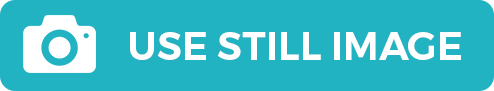
<style>
.page{position:relative;width:494px;height:91px;background:#22b3c3}
.page>*{position:absolute;margin:0}
.t1{font:39.1px "Montserrat-SemiBold";color:#ffffff}
</style>
<div class="page">
<p class="t1" style="left:130px;top:32px;width:331px;height:28px">USE STILL IMAGE</p>
</div>
